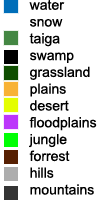
<style>
.page{position:relative;width:100px;height:200px;background:#ffffff}
.page>*{position:absolute;margin:0}
.t1{font:14px "ArialMT";color:#000000}
</style>
<div class="page">
<p class="t1" style="left:29px;top:0px;width:68px;height:195px">water<br>snow<br>taiga<br>swamp<br>grassland<br>plains<br>desert<br>floodplains<br>jungle<br>forrest<br>hills<br>mountains</p>
</div>
